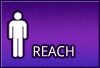
<style>
.page{position:relative;width:100px;height:68px}
.page>*{position:absolute;margin:0}
.t1{font:14px "DroidSans";color:#ffffff}
</style>
<div class="page">
<p class="t1" style="left:33px;top:46px;width:41px;height:11px">REACH</p>
</div>
